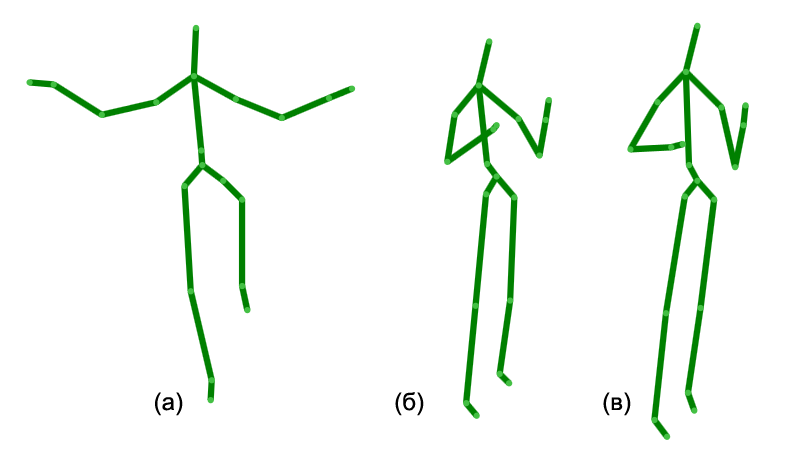
<style>
.page{position:relative;width:800px;height:455px;background:#ffffff}
.page>*{position:absolute;margin:0}
.t1{font:24px "ArialMT";color:#000000}
</style>
<div class="page">
<p class="t1" style="left:155px;top:392px;width:28px;height:24px">(а)</p>
<p class="t1" style="left:395px;top:392px;width:29px;height:24px">(б)</p>
<p class="t1" style="left:603px;top:392px;width:28px;height:24px">(в)</p>
</div>
